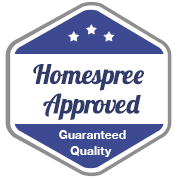
<style>
.page{position:relative;width:182px;height:180px;background:#ffffff}
.page>*{position:absolute;margin:0}
.t1{font:26.5px/18px "Lobster1.4";color:#303b6a}
.t2{font:12px/4px "HelveticaNeue-Bold";color:#ffffff}
.t3{font:11px/4px "HelveticaNeue-Bold";color:#ffffff}
</style>
<div class="page">
<p class="t1" style="left:33px;top:64px;width:111px;height:57px;text-align:center">Homespree <br>Approved</p>
<p class="t2" style="left:59px;top:130px;width:67px;height:27px;text-align:center">Gua<span class="t3">r</span>anteed<br>Quality</p>
</div>
